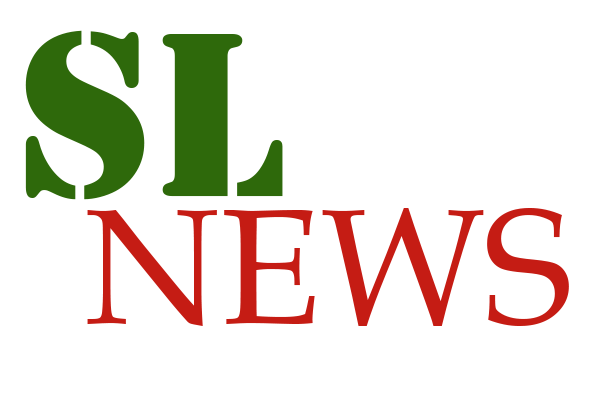
<style>
.page{position:relative;width:600px;height:400px;background:#ffffff}
.page>*{position:absolute;margin:0}
.t1{font:242.6px "Stencil";color:#2e690b}
.t2{font:164.1px "BookAntiqua";color:#c51c14}
</style>
<div class="page">
<p class="t1" style="left:25px;top:30px;width:258px;height:170px">SL</p>
<p class="t2" style="left:87px;top:208px;width:482px;height:118px">NEWS</p>
</div>
